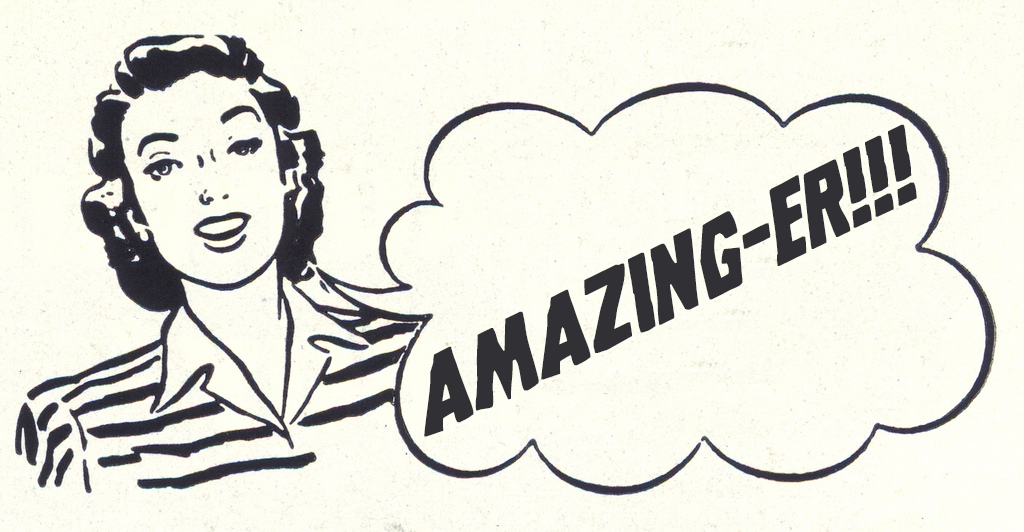
<style>
.page{position:relative;width:1024px;height:532px}
.page>*{position:absolute;margin:0}
.t1{font:100px "GrimGhostExpandedItalic";letter-spacing:0.005em;color:#313035;font-variant:small-caps;font-weight:bold}
</style>
<div class="page">
<p class="t1" style="left:424px;top:124px;width:493px;height:313px;rotate:-26deg">AMAZING-ER!!!</p>
</div>
